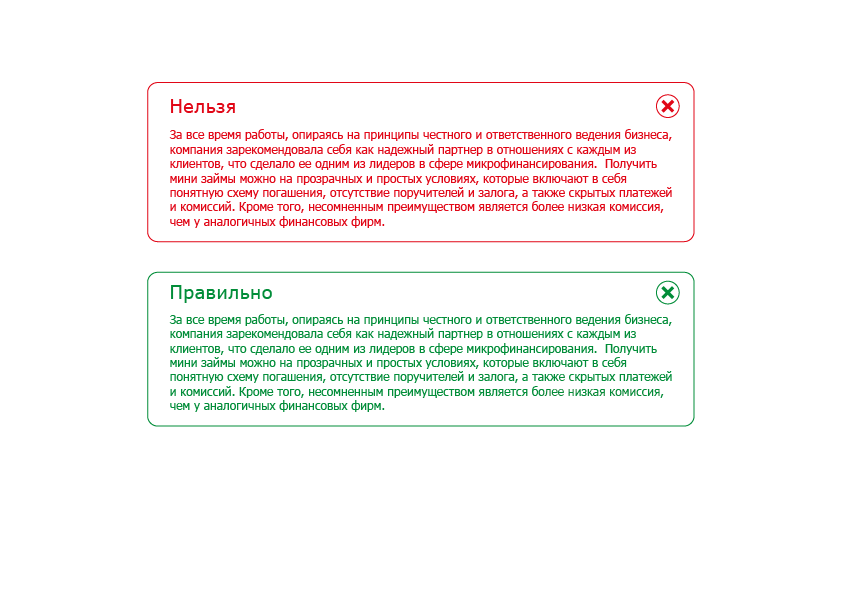
<style>
.page{position:relative;width:842px;height:596px;background:#ffffff}
.page>*{position:absolute;margin:0}
.t1{font:19px "Tahoma";letter-spacing:0.05em;color:#e10717}
.t2{font:12px "Tahoma";color:#e10717}
.t3{font:19px "Tahoma";letter-spacing:0.05em;color:#028d39}
.t4{font:12px "Tahoma";color:#028d39}
</style>
<div class="page">
<p class="t1" style="left:171px;top:99px;width:64px;height:14px">Нельзя</p>
<p class="t2" style="left:169px;top:129px;width:503px;height:99px">За все время работы, опираясь на принципы честного и ответственного ведения бизнеса, компания зарекомендовала себя как надежный партнер в отношениях с каждым из клиентов, что сделало ее одним из лидеров в сфере микрофинансирования.  Получить мини займы можно на прозрачных и простых условиях, которые включают в себя понятную схему погашения, отсутствие поручителей и залога, а также скрытых платежей и комиссий. Кроме того, несомненным преимуществом является более низкая комиссия, чем у аналогичных финансовых фирм.</p>
<p class="t3" style="left:171px;top:285px;width:101px;height:18px">Правильно</p>
<p class="t4" style="left:169px;top:314px;width:503px;height:98px">За все время работы, опираясь на принципы честного и ответственного ведения бизнеса, компания зарекомендовала себя как надежный партнер в отношениях с каждым из клиентов, что сделало ее одним из лидеров в сфере микрофинансирования.  Получить мини займы можно на прозрачных и простых условиях, которые включают в себя понятную схему погашения, отсутствие поручителей и залога, а также скрытых платежей и комиссий. Кроме того, несомненным преимуществом является более низкая комиссия, чем у аналогичных финансовых фирм.</p>
</div>
